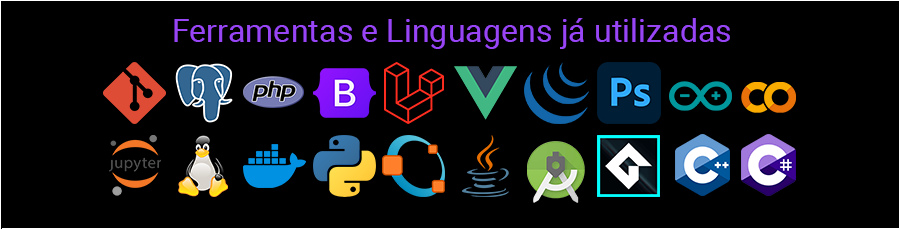
<style>
.page{position:relative;width:900px;height:229px;background:#000000}
.page>*{position:absolute;margin:0}
.t1{font:32.3px "Roboto-Regular";color:#9745f5}
</style>
<div class="page">
<p class="t1" style="left:174px;top:18px;width:556px;height:31px">Ferramentas e Linguagens já utilizadas</p>
</div>
